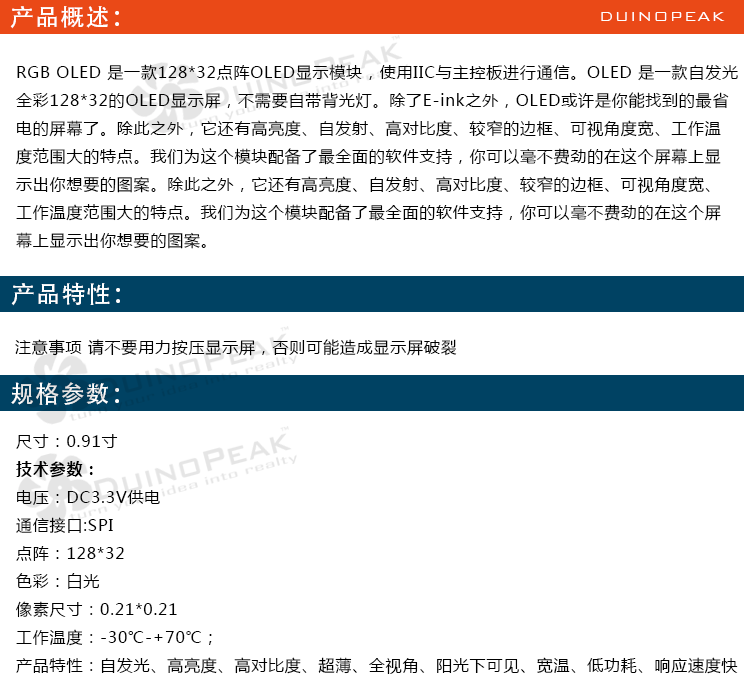
<style>
.page{position:relative;width:744px;height:688px;background:#ffffff}
.page>*{position:absolute;margin:0}
.t1{font:24px "AdobeHeitiStd-Regular";letter-spacing:0.05em;color:#ffffff}
.t2{font:18px "BankGothicBT-Light";letter-spacing:0.05em;color:#ffffff}
.t3{font:16px "MicrosoftYaHei";letter-spacing:0.05em;color:#000000}
.t4{font:24px "AdobeHeitiStd-Regular";letter-spacing:0.05em}
.t5{font:16px "MicrosoftYaHei-Bold";letter-spacing:0.05em;color:#000000}
</style>
<div class="page">
<p class="t1" style="left:10px;top:6px;width:109px;height:23px">产品概述：</p>
<p class="t2" style="left:601px;top:12px;width:124px;height:9px">DUINOPEAK</p>
<p class="t3" style="left:16px;top:64px;width:722px;height:185px">RGB OLED 是一款128*32点阵OLED显示模块，使用IIC与主控板进行通信。OLED 是一款自发光<br>全彩128*32的OLED显示屏，不需要自带背光灯。除了E-ink之外，OLED或许是你能找到的最省<br>电的屏幕了。除此之外，它还有高亮度、自发射、高对比度、较窄的边框、可视角度宽、工作温<br>度范围大的特点。我们为这个模块配备了最全面的软件支持，你可以毫不费劲的在这个屏幕上显<br>示出你想要的图案。除此之外，它还有高亮度、自发射、高对比度、较窄的边框、可视角度宽、<br>工作温度范围大的特点。我们为这个模块配备了最全面的软件支持，你可以毫不费劲的在这个屏<br>幕上显示出你想要的图案。</p>
<p class="t1" style="left:11px;top:282px;width:109px;height:24px">产品特性：</p>
<p class="t3" style="left:15px;top:339px;width:442px;height:17px">注意事项 请不要用力按压显示屏，否则可能造成显示屏破裂</p>
<p class="t4" style="left:11px;top:382px;width:108px;height:23px">规格参数：</p>
<p class="t3" style="left:16px;top:434px;width:722px;height:240px">尺寸：0.91寸<br><span class="t5">技术参数：<br></span>电压：DC3.3V供电<br>通信接口:SPI<br>点阵：128*32<br>色彩：白光<br>像素尺寸：0.21*0.21<br>工作温度：-30℃-+70℃；<br>产品特性：自发光、高亮度、高对比度、超薄、全视角、阳光下可见、宽温、低功耗、响应速度快</p>
</div>
